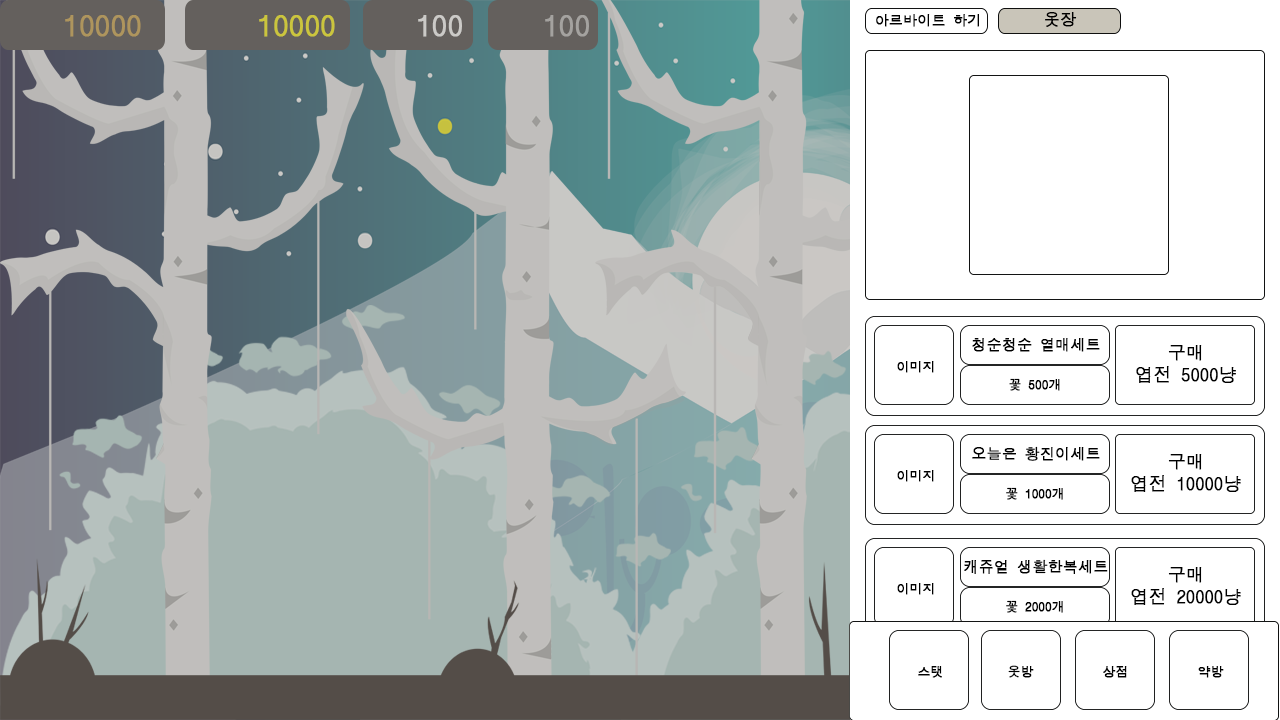
<style>
.page{position:relative;width:1280px;height:720px;background:#ffffff}
.page>*{position:absolute;margin:0}
.t1{font:29.7px "DotumChe";color:#ae955d;font-weight:bold}
.t2{font:29.7px "DotumChe";color:#cbc53d;font-weight:bold}
.t3{font:29.7px "DotumChe";color:#cbcac7;font-weight:bold}
.t4{font:29.7px "DotumChe";color:#b6b5b5;font-weight:bold}
.t5{font:14px "DotumChe";color:#000000;font-weight:bold}
.t6{font:16.1px "DotumChe";color:#000000;font-weight:bold}
.t7{font:15px "DotumChe";color:#000000;font-weight:bold}
.t8{font:18px "DotumChe";color:#000000;font-weight:bold}
.t9{font:12.9px "DotumChe";color:#000000;font-weight:bold}
</style>
<div class="page">
<p class="t1" style="left:65px;top:15px;width:76px;height:22px">10000</p>
<p class="t2" style="left:259px;top:15px;width:76px;height:22px">10000</p>
<p class="t3" style="left:418px;top:15px;width:44px;height:22px">100</p>
<p class="t4" style="left:545px;top:15px;width:44px;height:22px">100</p>
<p class="t5" style="left:876px;top:14px;width:103px;height:13px">아르바이트 하기</p>
<p class="t6" style="left:1045px;top:12px;width:32px;height:15px">옷장</p>
<p class="t7" style="left:972px;top:338px;width:128px;height:14px">청순청순 열매세트</p>
<p class="t8" style="left:1136px;top:345px;width:100px;height:38px;text-align:center">구매<br>엽전 5000냥</p>
<p class="t9" style="left:897px;top:361px;width:37px;height:12px">이미지</p>
<p class="t9" style="left:1009px;top:378px;width:51px;height:13px">꽃 500개</p>
<p class="t7" style="left:972px;top:446px;width:128px;height:15px">오늘은 황진이세트</p>
<p class="t8" style="left:1131px;top:454px;width:110px;height:38px;text-align:center">구매<br>엽전 10000냥</p>
<p class="t9" style="left:897px;top:470px;width:37px;height:12px">이미지</p>
<p class="t9" style="left:1006px;top:487px;width:57px;height:13px">꽃 1000개</p>
<p class="t7" style="left:964px;top:559px;width:144px;height:15px">캐쥬얼 생활한복세트</p>
<p class="t8" style="left:1131px;top:567px;width:110px;height:38px;text-align:center">구매<br>엽전 20000냥</p>
<p class="t9" style="left:897px;top:583px;width:37px;height:12px">이미지</p>
<p class="t9" style="left:1006px;top:600px;width:57px;height:13px">꽃 2000개</p>
<p class="t9" style="left:1008px;top:665px;width:26px;height:13px">옷방</p>
<p class="t9" style="left:918px;top:666px;width:24px;height:12px">스탯</p>
<p class="t9" style="left:1103px;top:666px;width:24px;height:12px">상점</p>
<p class="t9" style="left:1198px;top:666px;width:26px;height:12px">약방</p>
</div>
